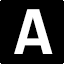
<style>
.page{position:relative;width:64px;height:64px;background:#000000}
.page>*{position:absolute;margin:0}
.t1{font:70px "Consolas-Bold";color:#ffffff}
</style>
<div class="page">
<p class="t1" style="left:14px;top:9px;width:39px;height:45px">A</p>
</div>
